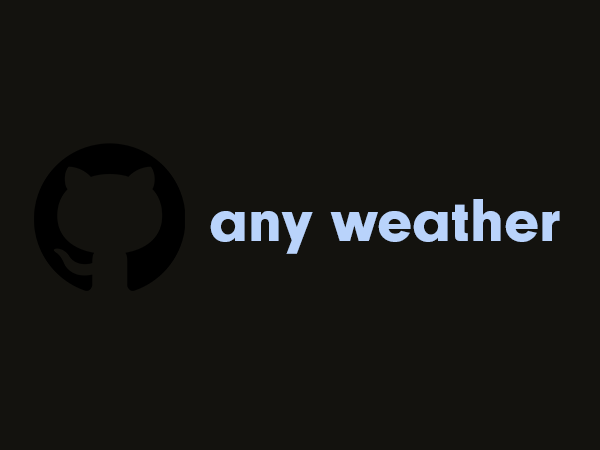
<style>
.page{position:relative;width:600px;height:450px;background:#13120e}
.page>*{position:absolute;margin:0}
.t1{font:62.5px "NeuzeitGro-Bla";color:#b9d3fb}
</style>
<div class="page">
<p class="t1" style="left:210px;top:199px;width:350px;height:55px">any weather</p>
</div>
